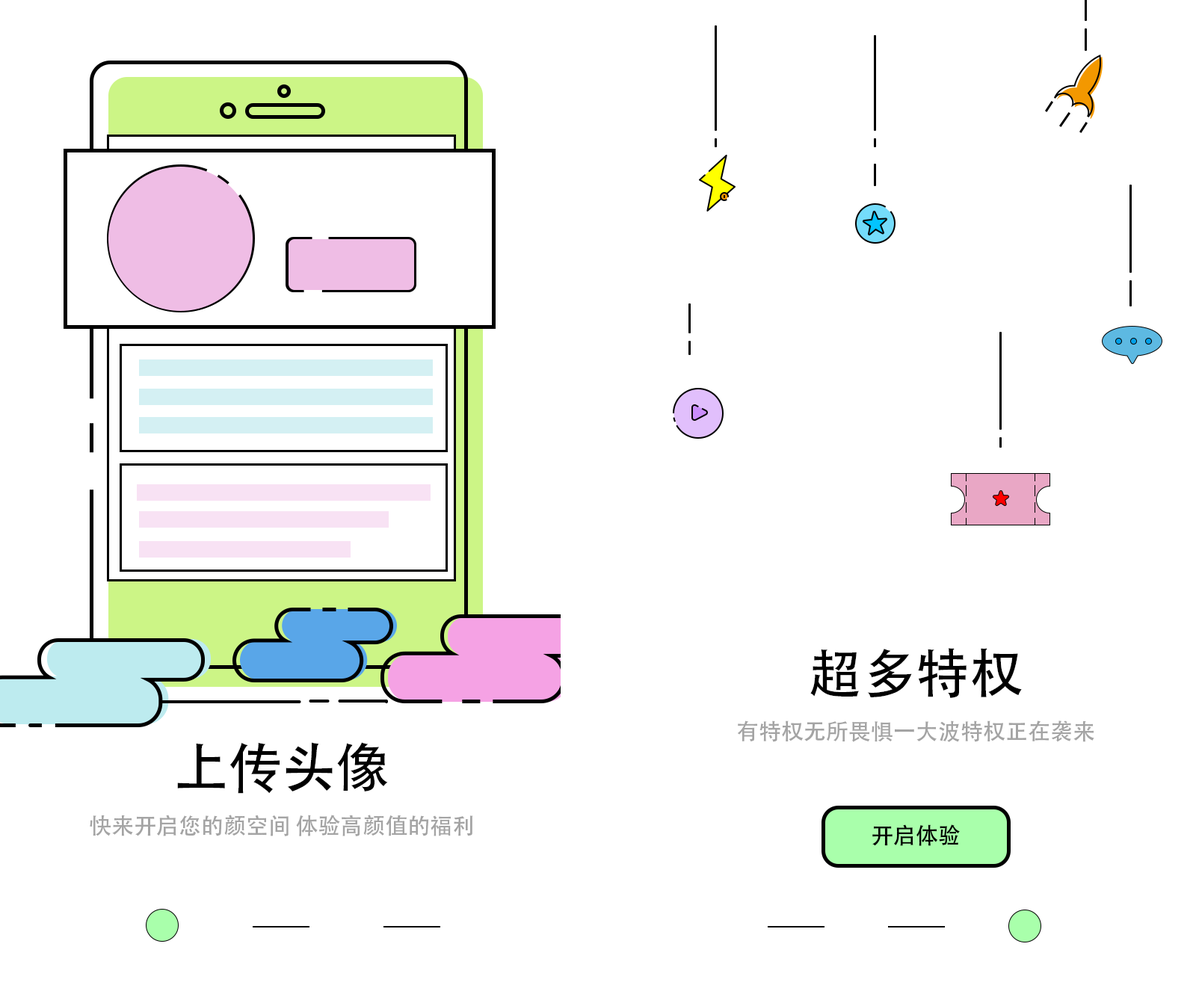
<style>
.page{position:relative;width:1196px;height:997px;background:#ffffff}
.page>*{position:absolute;margin:0}
.t1{font:53.8px "AdobeHeitiStd-Regular";color:#000000}
.t2{font:22.4px "AdobeHeitiStd-Regular";color:#a4a4a4}
.t3{font:22.4px "AdobeHeitiStd-Regular";color:#000000}
</style>
<div class="page">
<p class="t1" style="left:810px;top:648px;width:212px;height:50px">超多特权</p>
<p class="t2" style="left:737px;top:721px;width:357px;height:21px">有特权无所畏惧一大波特权正在袭来</p>
<p class="t1" style="left:177px;top:742px;width:211px;height:52px">上传头像</p>
<p class="t2" style="left:90px;top:815px;width:383px;height:21px">快来开启您的颜空间 体验高颜值的福利</p>
<p class="t3" style="left:872px;top:824px;width:88px;height:22px">开启体验</p>
</div>
